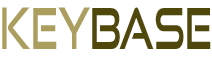
<style>
.page{position:relative;width:212px;height:60px;background:#ffffff}
.page>*{position:absolute;margin:0}
.t1{font:56.4px "GoodTimesRg-Regular";color:#50470d;scale:0.62 1}
.t2{font:56.4px "GoodTimesRg-Regular";color:#ab9e5e;scale:0.62 1}
</style>
<div class="page">
<p class="t1" style="left:2px;top:7px;width:209px;height:42px"><span class="t2">Key</span>base</p>
</div>
